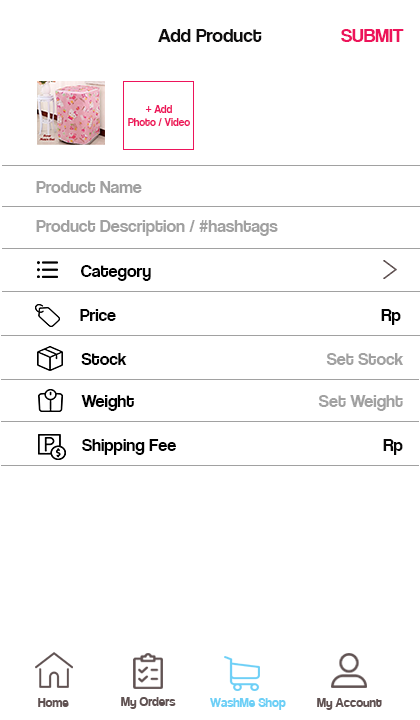
<style>
.page{position:relative;width:420px;height:720px;background:#ffffff}
.page>*{position:absolute;margin:0}
.t1{font:20px "CoolveticaRg-Regular";color:#0f0e0e}
.t2{font:20px "CoolveticaRg-Regular";color:#ed145b}
.t3{font:11px "CoolveticaRg-Regular";color:#ed145b}
.t4{font:18px "CoolveticaRg-Regular";color:#a1a1a1}
.t5{font:18px "CoolveticaRg-Regular";color:#000000}
.t6{font:18px "CoolveticaRg-Regular";color:#090808}
.t7{font:14px "Coolvetica-Regular";color:#605252}
.t8{font:14px "Coolvetica-Regular";color:#6dcff6}
</style>
<div class="page">
<p class="t1" style="left:158px;top:29px;width:104px;height:13px">Add Product</p>
<p class="t2" style="left:341px;top:29px;width:63px;height:13px">SUBMIT</p>
<p class="t3" style="left:128px;top:105px;width:62px;height:21px;text-align:center">+ Add<br>Photo / Video</p>
<p class="t4" style="left:36px;top:181px;width:106px;height:12px">Product Name</p>
<p class="t4" style="left:36px;top:220px;width:242px;height:16px">Product Description / #hashtags</p>
<p class="t5" style="left:81px;top:265px;width:70px;height:16px">Category</p>
<p class="t5" style="left:80px;top:309px;width:36px;height:12px">Price</p>
<p class="t5" style="left:381px;top:309px;width:20px;height:16px">Rp</p>
<p class="t5" style="left:81px;top:353px;width:46px;height:12px">Stock</p>
<p class="t4" style="left:326px;top:353px;width:78px;height:12px">Set Stock</p>
<p class="t5" style="left:81px;top:395px;width:53px;height:16px">Weight</p>
<p class="t4" style="left:318px;top:395px;width:85px;height:16px">Set Weight</p>
<p class="t5" style="left:82px;top:439px;width:94px;height:16px">Shipping Fee</p>
<p class="t6" style="left:383px;top:439px;width:20px;height:16px">Rp</p>
<p class="t7" style="left:38px;top:698px;width:31px;height:9px">Home</p>
<p class="t7" style="left:121px;top:697px;width:55px;height:12px">My Orders</p>
<p class="t8" style="left:210px;top:698px;width:76px;height:12px">WashMe Shop</p>
<p class="t7" style="left:317px;top:698px;width:65px;height:12px">My Account</p>
</div>
